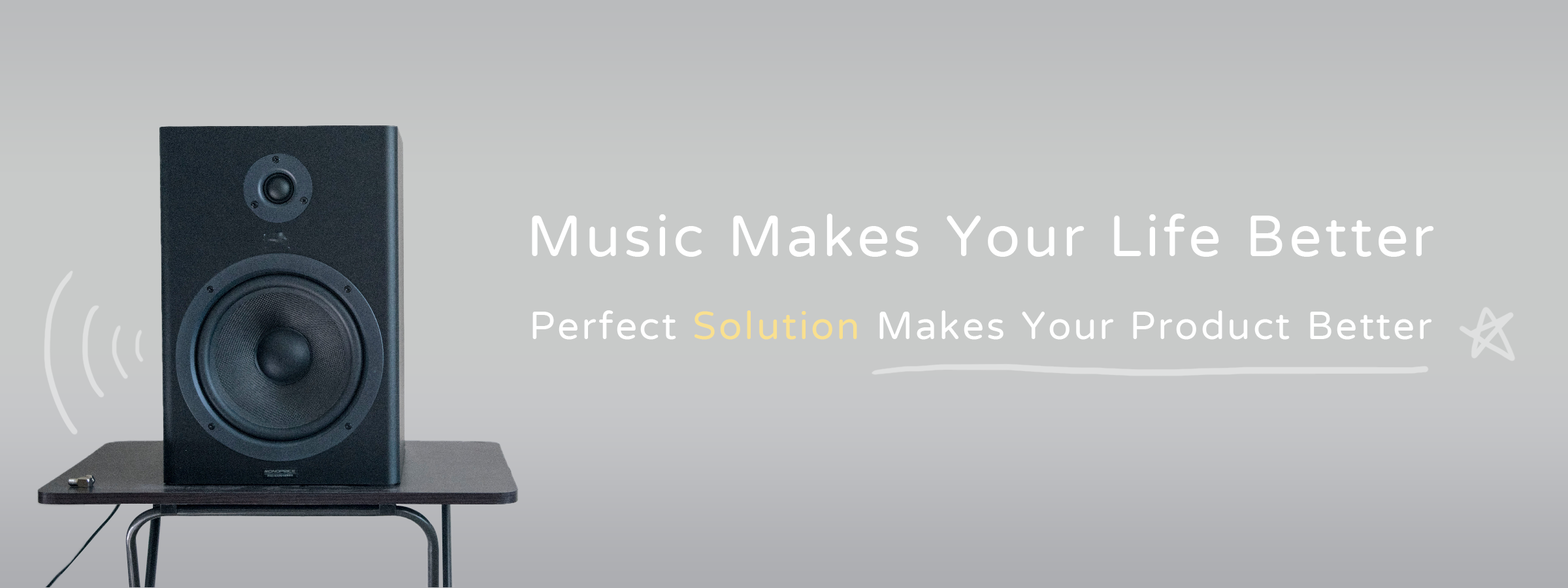
<style>
.page{position:relative;width:1568px;height:588px;background:#c8cac9}
.page>*{position:absolute;margin:0}
.t1{font:58.8px "jf-openhuninn-1.1";letter-spacing:0.06em;color:#ffffff}
.t2{font:39.2px "jf-openhuninn-1.1";letter-spacing:0.06em;color:#ffffff}
.t3{font:39.2px "jf-openhuninn-1.1";letter-spacing:0.06em;color:#f9e08f}
</style>
<div class="page">
<p class="t1" style="left:532px;top:214px;width:902px;height:43px">Music Makes Your Life Better</p>
<p class="t2" style="left:532px;top:310px;width:900px;height:30px">Perfect <span class="t3">Solution</span> Makes Your Product Better</p>
</div>
